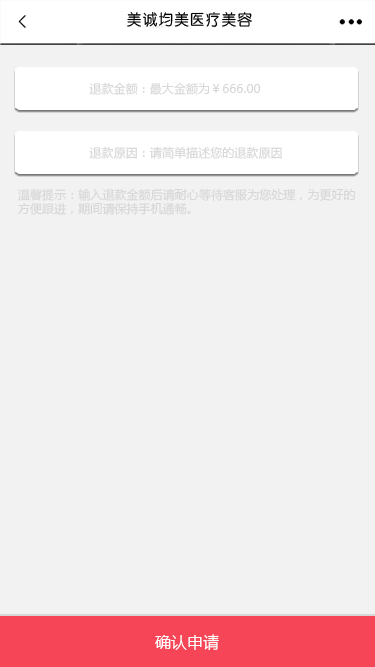
<style>
.page{position:relative;width:375px;height:667px;background:#f2f2f2}
.page>*{position:absolute;margin:0}
.t1{font:12px "MicrosoftYaHei";letter-spacing:0.005em;color:#d7d7d7}
.t2{font:12px/14px "MicrosoftYaHei";letter-spacing:0.005em;color:#d7d7d7}
.t3{font:16px "MicrosoftYaHei";letter-spacing:0.005em;color:#ffffff}
</style>
<div class="page">
<p class="t1" style="left:89px;top:82px;width:172px;height:13px">退款金额：最大金额为￥666.00</p>
<p class="t1" style="left:89px;top:146px;width:193px;height:13px">退款原因：请简单描述您的退款原因</p>
<p class="t2" style="left:18px;top:188px;width:337px;height:27px">温馨提示：输入退款金额后请耐心等待客服为您处理，为更好的<br>方便跟进，期间请保持手机通畅。</p>
<p class="t3" style="left:155px;top:634px;width:64px;height:17px">确认申请</p>
</div>
